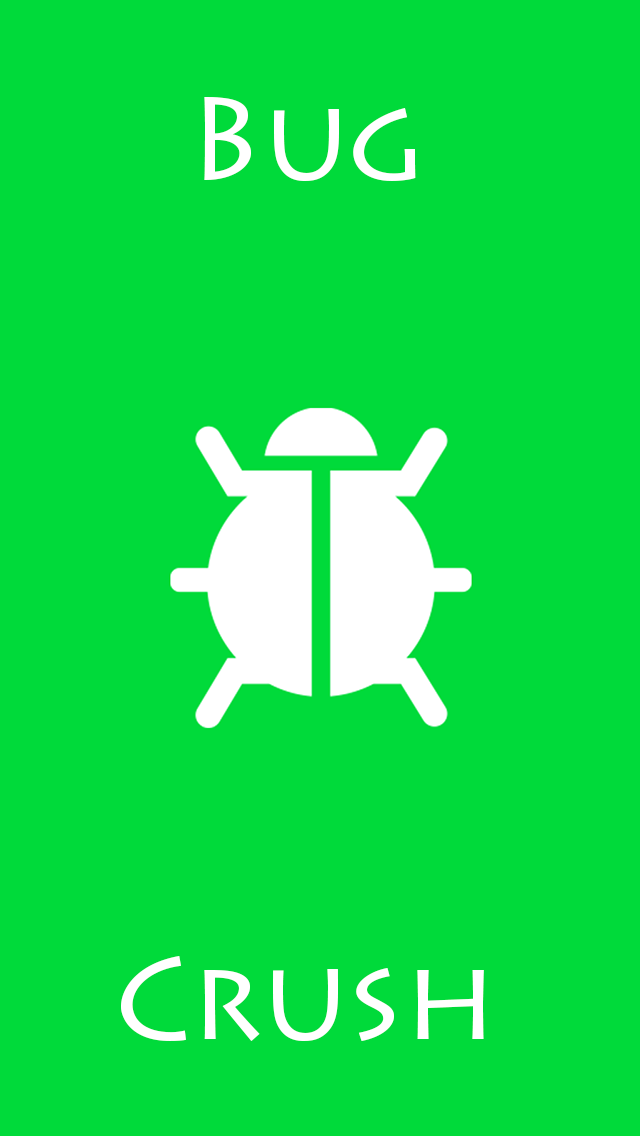
<style>
.page{position:relative;width:640px;height:1136px;background:#00da3a}
.page>*{position:absolute;margin:0}
.t1{font:116px/66.2px "LithosPro-Regular";color:#ffffff}
</style>
<div class="page">
<p class="t1" style="left:121px;top:97px;width:363px;height:944px;text-align:center">Bug<br><br><br><br><br><br><br><br><br><br><br><br><br>Crush</p>
</div>
